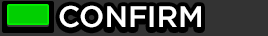
<style>
.page{position:relative;width:268px;height:36px;background:#333333}
.page>*{position:absolute;margin:0}
.t1{font:29.6px "Gotham-Medium";color:#ffffff}
</style>
<div class="page">
<p class="t1" style="left:59px;top:5px;width:142px;height:23px">CONFIRM</p>
</div>
